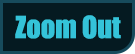
<style>
.page{position:relative;width:135px;height:54px;background:#051a21}
.page>*{position:absolute;margin:0}
.t1{font:28.2px "Impact";color:#34c3d9}
</style>
<div class="page">
<p class="t1" style="left:15px;top:15px;width:106px;height:24px">Zoom Out</p>
</div>
